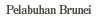
<style>
.page{position:relative;width:97px;height:18px;background:#ffffff}
.page>*{position:absolute;margin:0}
.t1{font:12px "RyuminPro-ExBold";letter-spacing:-0.04em;color:#4c4843;scale:0.9 1}
</style>
<div class="page">
<p class="t1" style="left:6px;top:5px;width:86px;height:9px">Pelabuhan Brunei</p>
</div>
